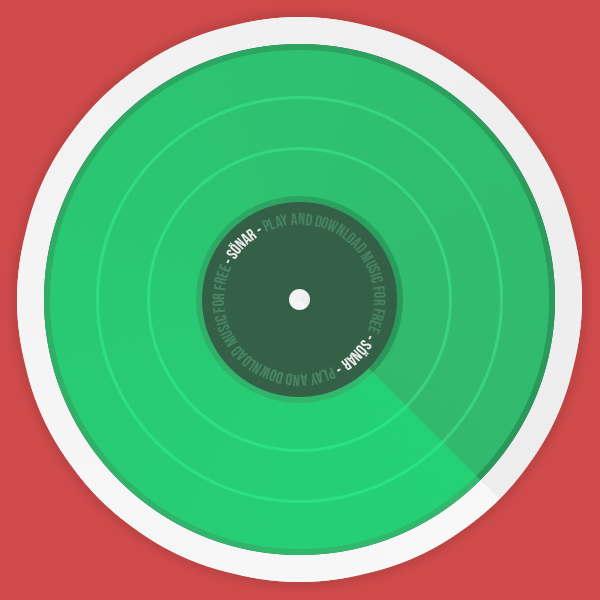
<style>
.page{position:relative;width:600px;height:600px;background:#cf4a4a}
.page>*{position:absolute;margin:0}
.t1{font:16.3px "BebasNeue";color:#478360}
.t2{font:16.3px "BebasNeue";color:#ebebeb}
.t3{font:16.3px "BebasNeue";color:#488562}
</style>
<div class="page">
<p class="t1" style="left:212px;top:212px;width:174px;height:175px;rotate:-72deg"><span class="t2">- Sönar - </span>Play and download music for free <span class="t2">- Sönar - </span><span class="t3">Play and download music for free</span></p>
</div>
